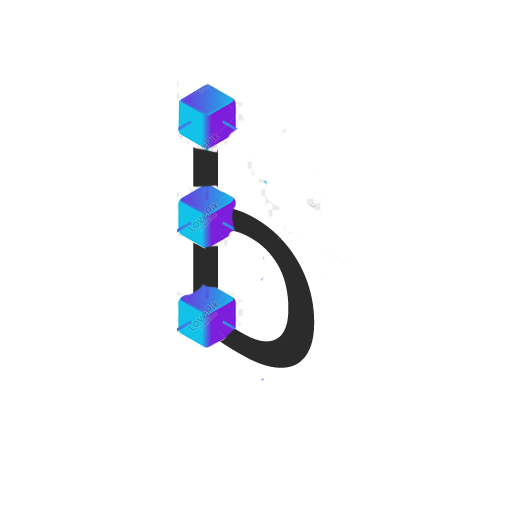
<style>
.page{position:relative;width:512px;height:512px;background:#ffffff}
.page>*{position:absolute;margin:0}
.t1{font:263.6px "Ubuntu";color:#2b2b2b;scale:1.14 1}
</style>
<div class="page">
<p class="t1" style="left:193px;top:124px;width:122px;height:244px;rotate:29deg">b</p>
</div>
